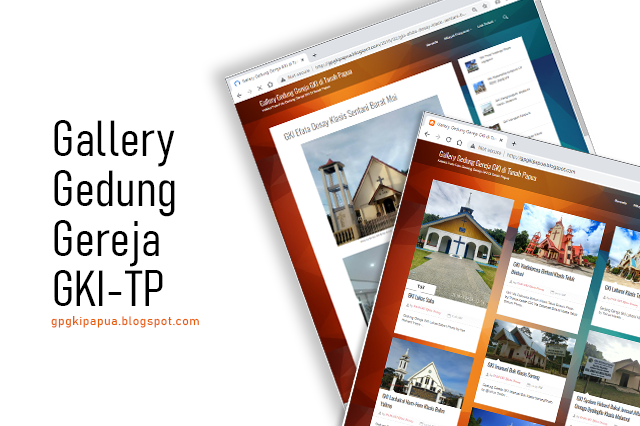
<style>
.page{position:relative;width:640px;height:426px;background:#ffffff}
.page>*{position:absolute;margin:0}
.t1{font:50px/50px "Bahnschrift-LightCondensed";letter-spacing:0.01em;color:#000000}
.t2{font:12px "Bahnschrift-SemiLight";letter-spacing:0.05em;color:#e85d04}
</style>
<div class="page">
<p class="t1" style="left:54px;top:120px;width:121px;height:186px">Gallery<br>Gedung<br>Gereja<br>GKI-TP</p>
<p class="t2" style="left:51px;top:316px;width:148px;height:12px">gpgkipapua.blogspot.com</p>
</div>
